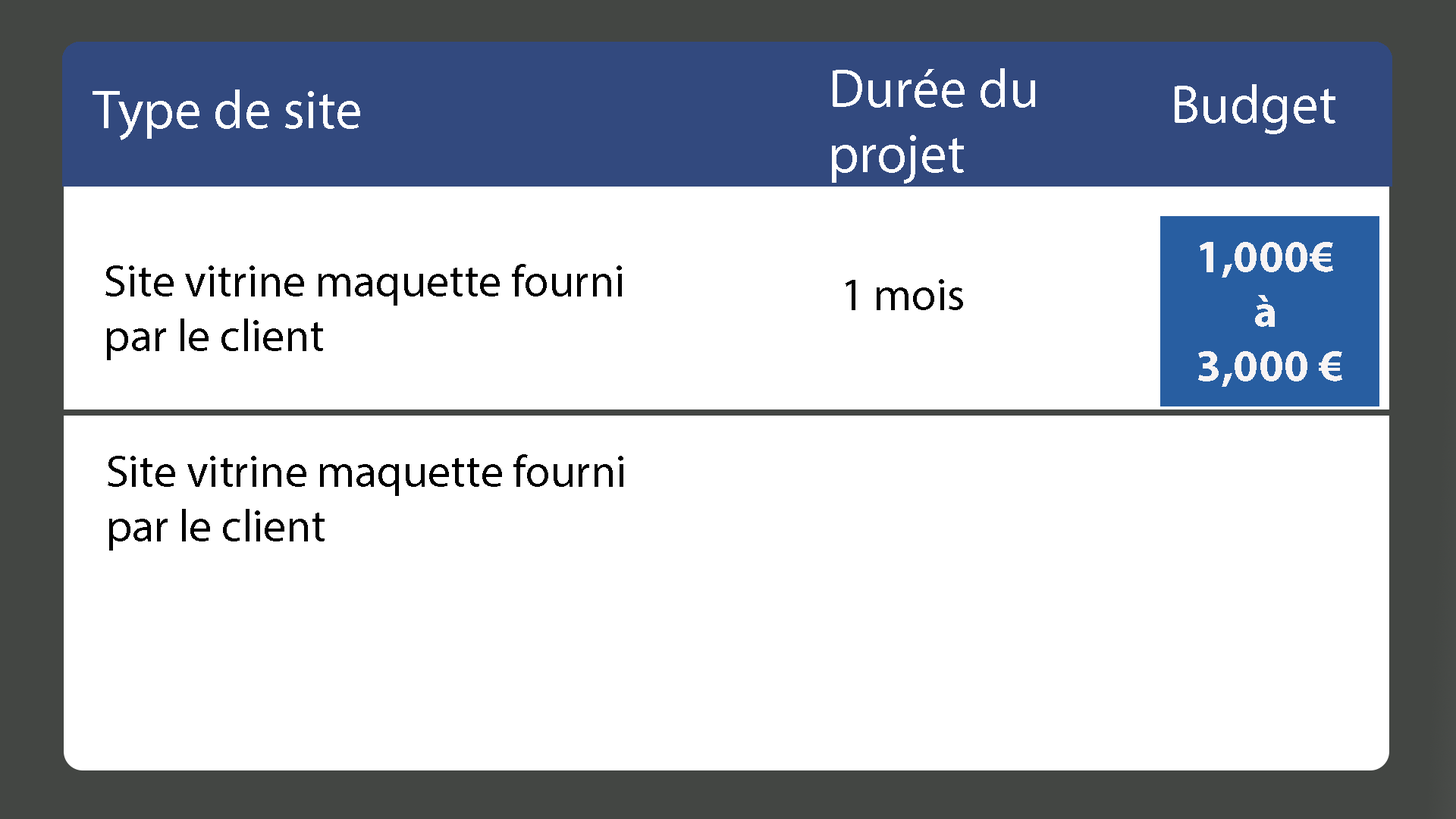
<style>
.page{position:relative;width:1456px;height:819px;background:#ffffff}
.page>*{position:absolute;margin:0}
.t1{font:54.6px "MyriadPro-Regular";color:#ffffff}
.t2{font:45.5px "MyriadPro-Bold";color:#f8f4f4}
.t3{font:45.5px "MyriadPro-Regular";color:#000000}
</style>
<div class="page">
<p class="t1" style="left:832px;top:68px;width:203px;height:116px">Durée du<br>projet</p>
<p class="t1" style="left:93px;top:89px;width:267px;height:51px">Type de site<br><br>Type de site</p>
<p class="t1" style="left:1175px;top:84px;width:160px;height:50px">Budget</p>
<p class="t2" style="left:1198px;top:242px;width:144px;height:145px;text-align:center">1,000€ <br>à <br>3,000 €</p>
<p class="t3" style="left:105px;top:264px;width:517px;height:96px">Site vitrine maquette fourni<br>par le client</p>
<p class="t3" style="left:846px;top:279px;width:117px;height:31px">1 mois</p>
<p class="t3" style="left:108px;top:454px;width:515px;height:97px">Site vitrine maquette fourni<br>par le client</p>
</div>
